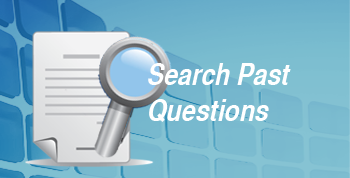
<style>
.page{position:relative;width:350px;height:178px}
.page>*{position:absolute;margin:0}
.t1{font:30px "HelveticaCYBoldOblique";color:#ffffff}
</style>
<div class="page">
<p class="t1" style="left:148px;top:63px;width:143px;height:59px">Search Past <br>Questions</p>
</div>
